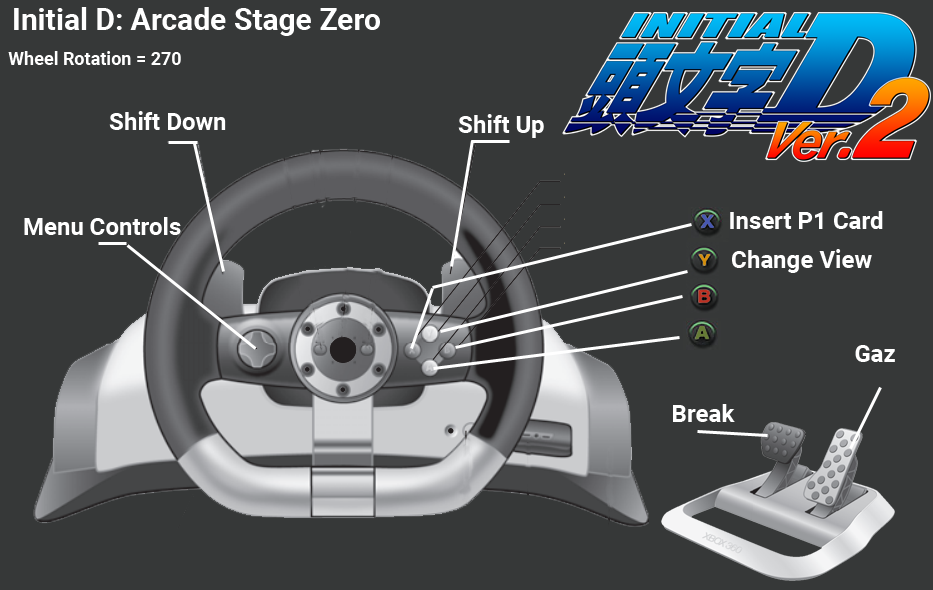
<style>
.page{position:relative;width:933px;height:590px;background:#363838}
.page>*{position:absolute;margin:0}
.t1{font:30px "Roboto-Bold";color:#ffffff}
.t2{font:18px "Roboto-Bold";color:#ffffff}
.t3{font:24px "Roboto-Bold";color:#ffffff}
</style>
<div class="page">
<p class="t1" style="left:14px;top:7px;width:366px;height:29px">Initial D: Arcade Stage Zero</p>
<p class="t2" style="left:8px;top:51px;width:173px;height:14px">Wheel Rotation = 270</p>
<p class="t3" style="left:109px;top:111px;width:117px;height:19px">Shift Down</p>
<p class="t3" style="left:458px;top:114px;width:86px;height:24px">Shift Up</p>
<p class="t3" style="left:24px;top:217px;width:157px;height:18px">Menu Controls</p>
<p class="t3" style="left:730px;top:211px;width:153px;height:18px">Insert P1 Card</p>
<p class="t3" style="left:732px;top:249px;width:140px;height:24px">Change View</p>
<p class="t3" style="left:855px;top:345px;width:40px;height:17px">Gaz</p>
<p class="t3" style="left:673px;top:404px;width:62px;height:18px">Break</p>
</div>
